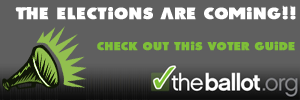
<style>
.page{position:relative;width:300px;height:100px;background:#5f5f5f}
.page>*{position:absolute;margin:0}
.t1{font:20px "Akira";letter-spacing:0.01em;color:#ffffff;font-weight:bold}
.t2{font:14px "Akira";letter-spacing:0.01em;color:#7ebf38;font-weight:bold}
</style>
<div class="page">
<p class="t1" style="left:15px;top:5px;width:281px;height:15px">The elections are coming!!</p>
<p class="t2" style="left:97px;top:41px;width:198px;height:10px">check out this voter guide</p>
</div>
